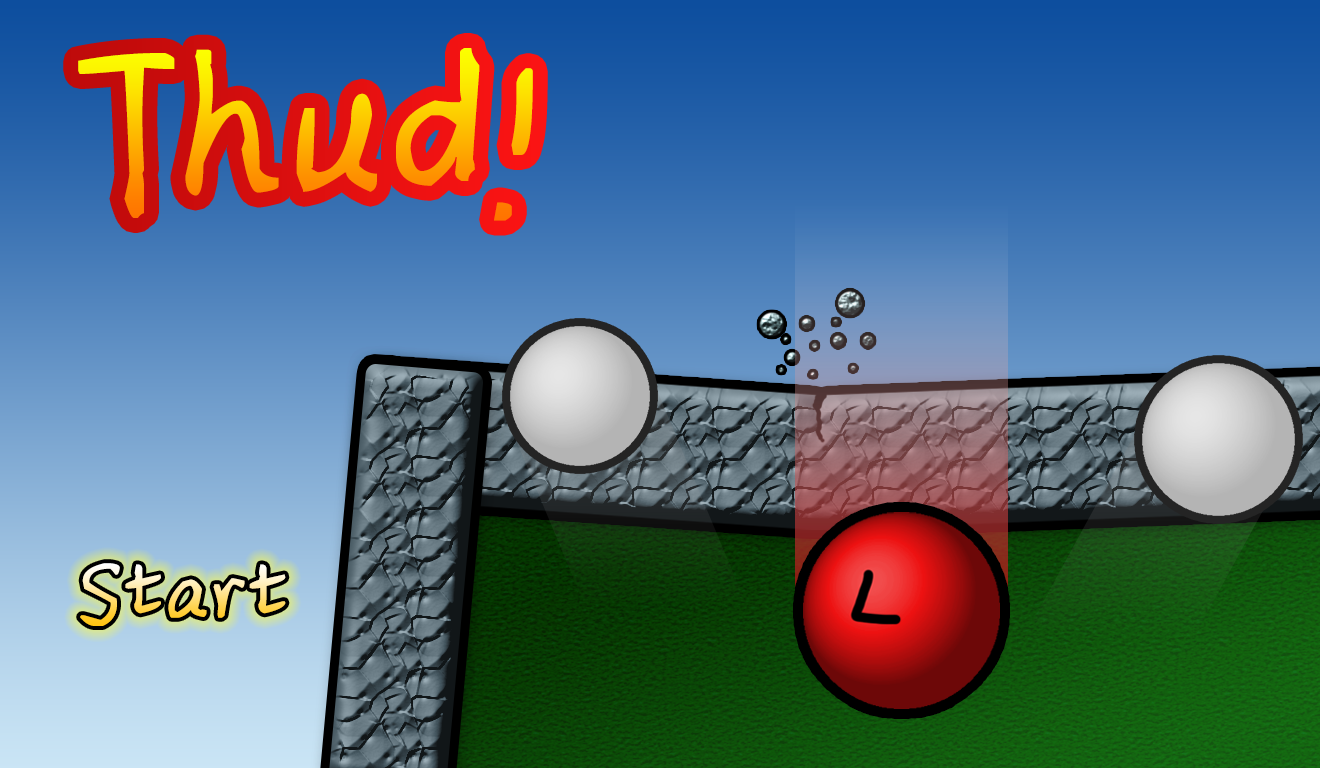
<style>
.page{position:relative;width:1320px;height:768px}
.page>*{position:absolute;margin:0}
.t1{font:240px "SentyMARUKO"}
.t2{font:100px "SentyMARUKO"}
</style>
<div class="page">
<p class="t1" style="left:78px;top:48px;width:455px;height:173px">Thud!</p>
<p class="t2" style="left:80px;top:563px;width:206px;height:63px">Start</p>
</div>
